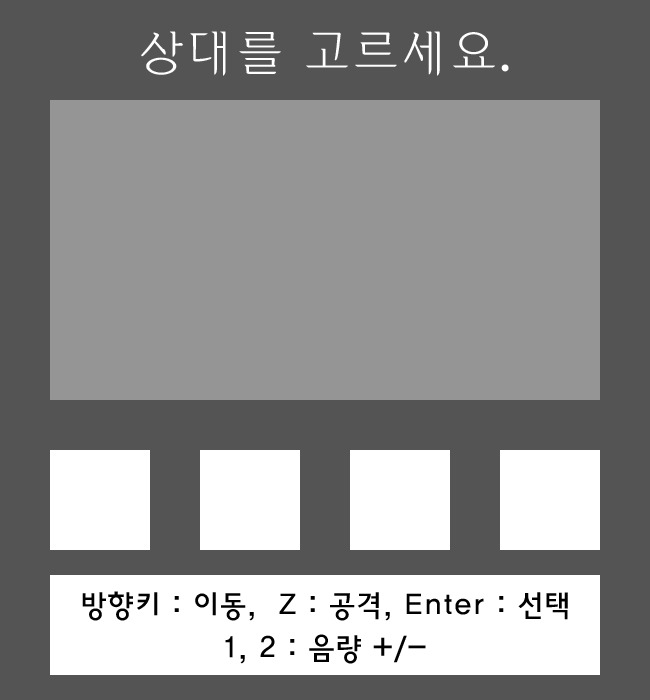
<style>
.page{position:relative;width:650px;height:700px;background:#545454}
.page>*{position:absolute;margin:0}
.t1{font:48px "Yj-BUTGOT-Light";color:#ffffff}
.t2{font:30px "HaanYGodic23";color:#000000}
</style>
<div class="page">
<p class="t1" style="left:141px;top:31px;width:368px;height:45px">상대를 고르세요.</p>
<p class="t2" style="left:82px;top:591px;width:486px;height:30px">방향키 : 이동,  Z : 공격, Enter : 선택</p>
<p class="t2" style="left:225px;top:634px;width:201px;height:30px">1, 2 : 음량 +/-</p>
</div>
